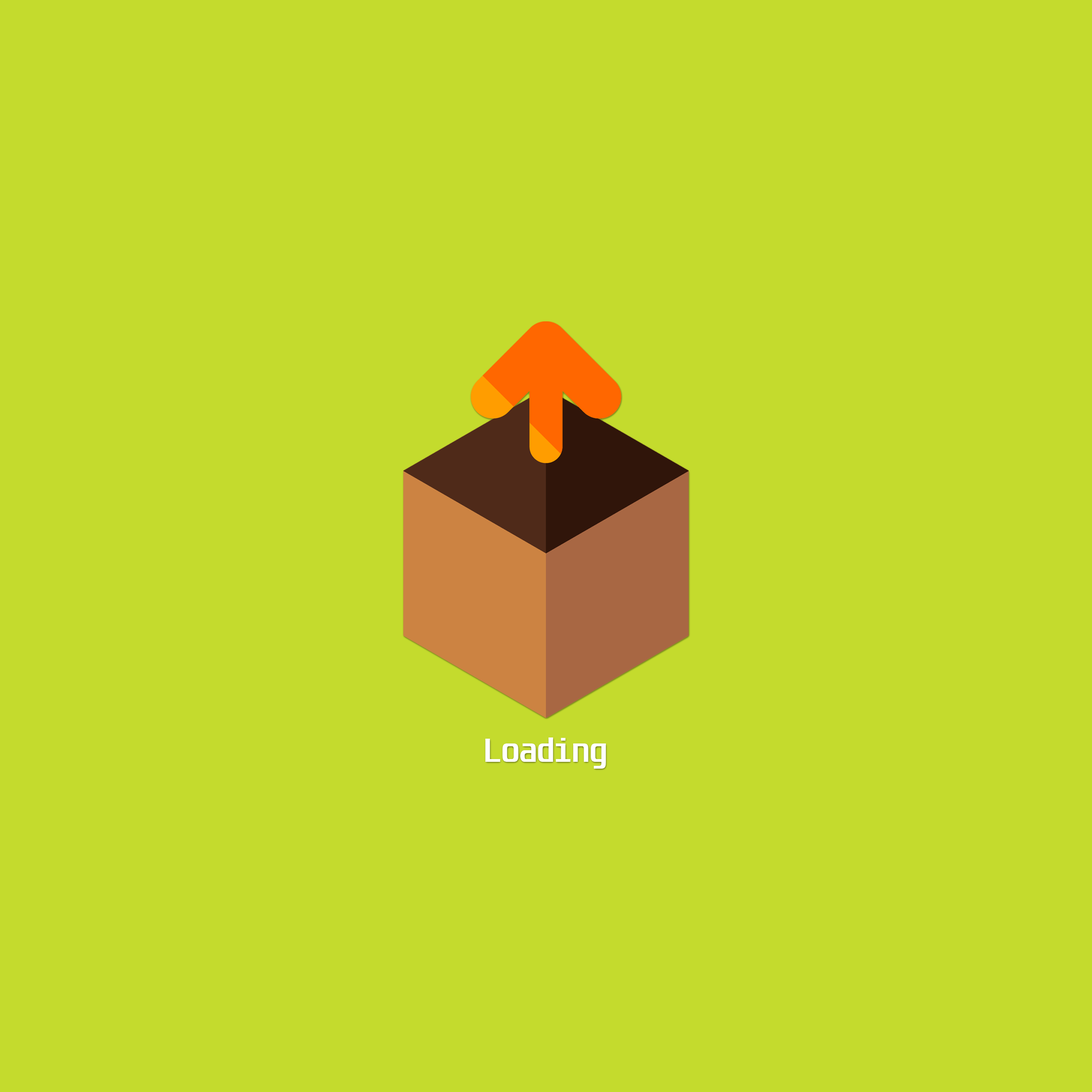
<style>
.page{position:relative;width:1092px;height:1092px;background:#c4db2d}
.page>*{position:absolute;margin:0}
.t1{font:28.8px "Unispace-Bold";color:#ffffff}
</style>
<div class="page">
<p class="t1" style="left:485px;top:737px;width:121px;height:32px">Loading</p>
</div>
